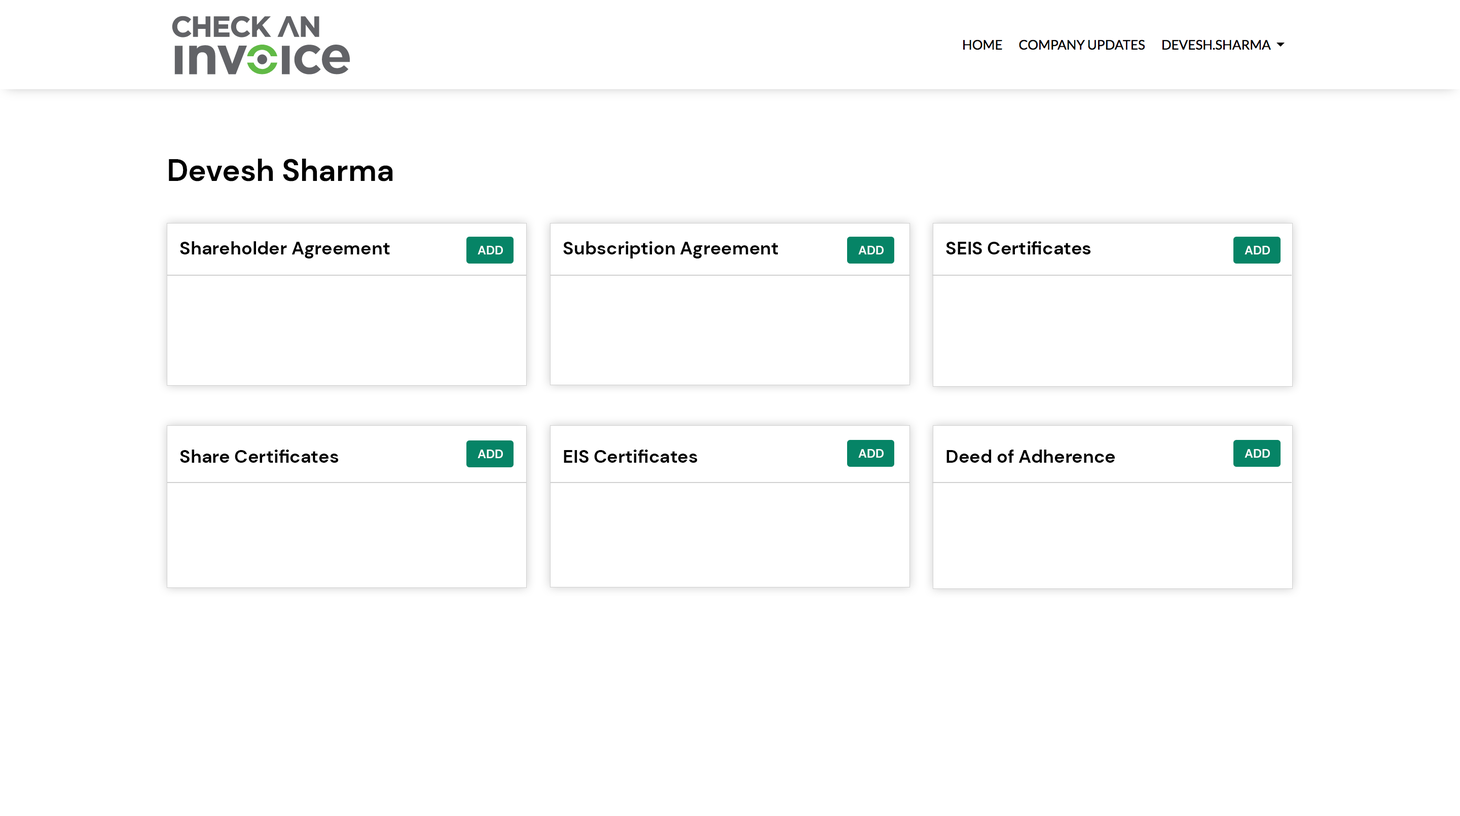
<style>
.page{position:relative;width:1460px;height:816px;background:#ffffff}
.page>*{position:absolute;margin:0}
.t1{font:30.4px "DMSans-Bold";color:#000000}
.t2{font:18.3px "DMSans-Bold";color:#000000}
.t3{font:12.2px "DMSans-Bold";color:#ffffff;text-transform:uppercase}
</style>
<div class="page">
<p class="t1" style="left:169px;top:159px;width:224px;height:23px">Devesh Sharma</p>
<p class="t2" style="left:180px;top:241px;width:210px;height:18px">Shareholder Agreement</p>
<p class="t3" style="left:478px;top:246px;width:25px;height:9px">Add</p>
<p class="t2" style="left:563px;top:241px;width:215px;height:18px">Subscription Agreement</p>
<p class="t3" style="left:859px;top:246px;width:25px;height:9px">Add</p>
<p class="t2" style="left:946px;top:241px;width:145px;height:14px">SEIS Certificates</p>
<p class="t3" style="left:1245px;top:246px;width:25px;height:9px">Add</p>
<p class="t2" style="left:180px;top:450px;width:159px;height:13px">Share Certificates</p>
<p class="t3" style="left:478px;top:450px;width:25px;height:8px">Add</p>
<p class="t2" style="left:564px;top:450px;width:134px;height:13px">EIS Certificates</p>
<p class="t3" style="left:859px;top:449px;width:25px;height:9px">Add</p>
<p class="t2" style="left:947px;top:450px;width:168px;height:13px">Deed of Adherence</p>
<p class="t3" style="left:1245px;top:449px;width:25px;height:9px">Add</p>
</div>
